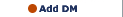
<style>
.page{position:relative;width:123px;height:17px;background:#ffffff}
.page>*{position:absolute;margin:0}
.t1{font:9px "Verdana-Bold";color:#20325f}
</style>
<div class="page">
<p class="t1" style="left:39px;top:5px;width:38px;height:7px">Add DM</p>
</div>
